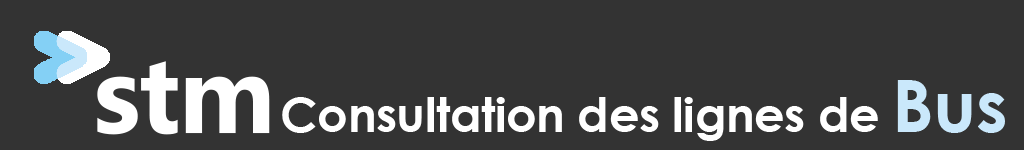
<style>
.page{position:relative;width:1024px;height:150px;background:#333333}
.page>*{position:absolute;margin:0}
.t1{font:110px "Ebrima-Bold";letter-spacing:-0.01em;color:#ffffff;scale:0.95 1}
.t2{font:48px "CenturyGothic-Bold";letter-spacing:-0.01em;color:#ffffff}
.t3{font:60px "MyriadPro-Regular";color:#ffffff;font-weight:bold}
.t4{font:72px "CenturyGothic-Bold";letter-spacing:-0.01em;color:#cae8fb}
</style>
<div class="page">
<p class="t1" style="left:97px;top:61px;width:173px;height:74px">stm</p>
<p class="t2" style="left:282px;top:80px;width:723px;height:61px"><span class="t3">         </span>Consultation des lignes de <span class="t4">Bus</span></p>
</div>
